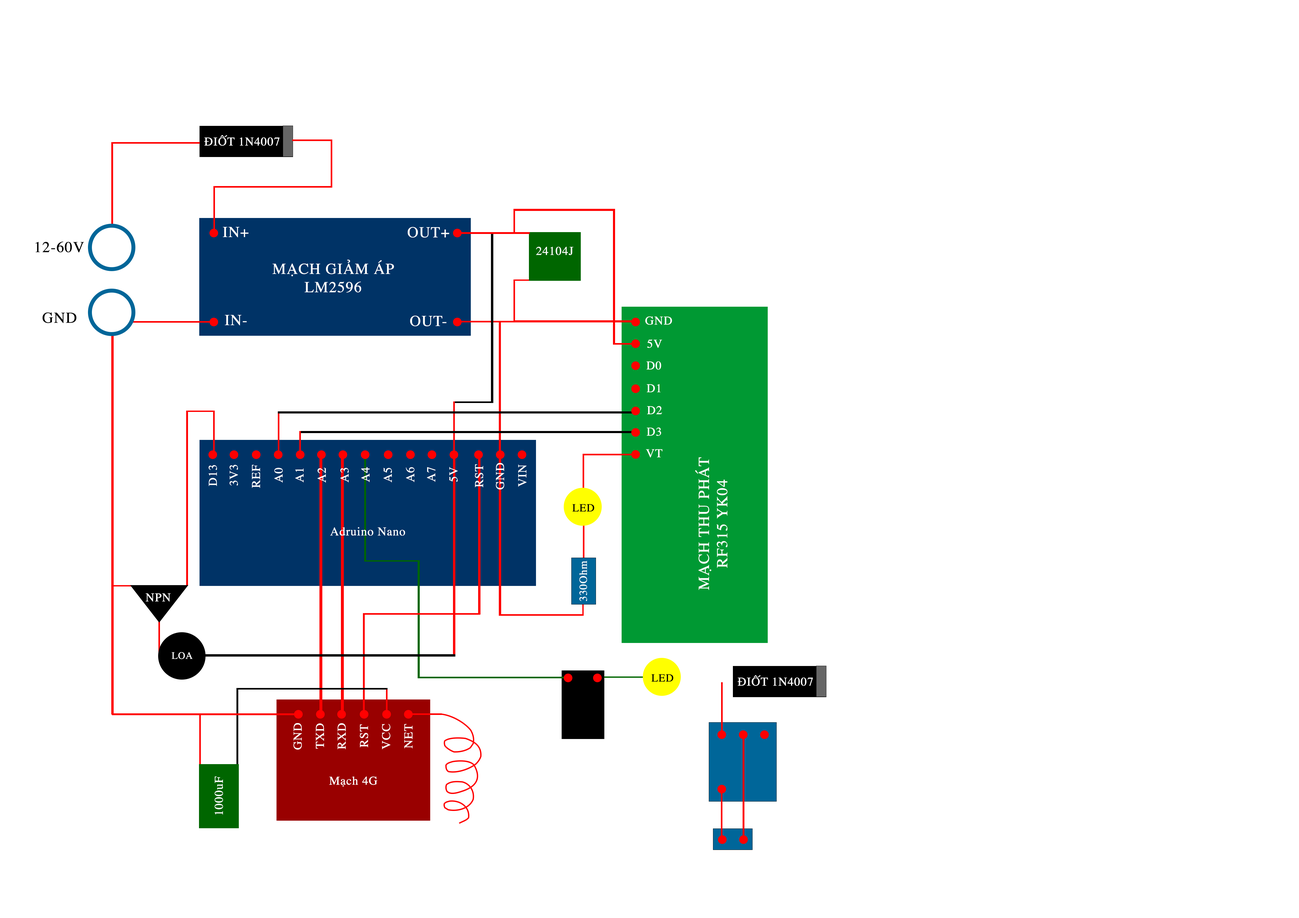
<style>
.page{position:relative;width:1299px;height:918px;background:#ffffff}
.page>*{position:absolute;margin:0}
.t1{font:12px "Times-Roman";letter-spacing:0.02em;color:#ffffff;font-weight:bold}
.t2{font:15.3px "Times-Roman";letter-spacing:0.02em;color:#ffffff;font-weight:bold}
.t3{font:15.3px "Times-Roman";letter-spacing:0.02em;color:#000000;font-weight:bold}
.t4{font:10.9px "Times-Roman";letter-spacing:0.02em;color:#000000;font-weight:bold}
.t5{font:10.9px "Times-Roman";letter-spacing:0.02em;color:#ffffff;font-weight:bold}
.t6{font:9.8px "Times-Roman";letter-spacing:0.02em;color:#ffffff;font-weight:bold}
</style>
<div class="page">
<p class="t1" style="left:204px;top:135px;width:76px;height:11px">ĐIỐT 1N4007</p>
<p class="t2" style="left:223px;top:227px;width:25px;height:10px">IN+</p>
<p class="t2" style="left:408px;top:227px;width:41px;height:11px">OUT+</p>
<p class="t3" style="left:35px;top:242px;width:49px;height:11px">12-60V</p>
<p class="t1" style="left:536px;top:247px;width:37px;height:8px">24104J</p>
<p class="t2" style="left:272px;top:260px;width:122px;height:33px;text-align:center">MẠCH GIẢM ÁP<br>LM2596</p>
<p class="t3" style="left:42px;top:313px;width:34px;height:10px">GND</p>
<p class="t2" style="left:225px;top:315px;width:22px;height:11px">IN-</p>
<p class="t2" style="left:410px;top:316px;width:36px;height:10px">OUT-</p>
<p class="t1" style="left:645px;top:316px;width:27px;height:9px">GND</p>
<p class="t1" style="left:647px;top:339px;width:15px;height:9px">5V</p>
<p class="t1" style="left:646px;top:361px;width:15px;height:9px">D0</p>
<p class="t1" style="left:647px;top:384px;width:13px;height:8px">D1</p>
<p class="t1" style="left:647px;top:406px;width:15px;height:8px">D2</p>
<p class="t1" style="left:647px;top:427px;width:14px;height:9px">D3</p>
<p class="t1" style="left:646px;top:449px;width:16px;height:9px">VT</p>
<p class="t2" style="left:695px;top:457px;width:32px;height:133px;text-align:center;rotate:-90deg">MẠCH THU PHÁT<br>RF315 YK04</p>
<p class="t1" style="left:208px;top:465px;width:9px;height:21px;rotate:-90deg">D13</p>
<p class="t1" style="left:229px;top:465px;width:9px;height:21px;rotate:-90deg">3V3</p>
<p class="t1" style="left:252px;top:465px;width:8px;height:23px;rotate:-90deg">REF</p>
<p class="t1" style="left:274px;top:468px;width:9px;height:15px;rotate:-90deg">A0</p>
<p class="t1" style="left:295px;top:469px;width:9px;height:14px;rotate:-90deg">A1</p>
<p class="t1" style="left:317px;top:468px;width:9px;height:15px;rotate:-90deg">A2</p>
<p class="t1" style="left:340px;top:468px;width:9px;height:15px;rotate:-90deg">A3</p>
<p class="t1" style="left:361px;top:467px;width:9px;height:15px;rotate:-90deg">A4</p>
<p class="t1" style="left:383px;top:468px;width:9px;height:15px;rotate:-90deg">A5</p>
<p class="t1" style="left:406px;top:467px;width:8px;height:15px;rotate:-90deg">A6</p>
<p class="t1" style="left:427px;top:467px;width:8px;height:15px;rotate:-90deg">A7</p>
<p class="t1" style="left:449px;top:467px;width:9px;height:15px;rotate:-90deg">5V</p>
<p class="t1" style="left:475px;top:464px;width:8px;height:23px;rotate:-90deg">RST</p>
<p class="t1" style="left:496px;top:463px;width:8px;height:27px;rotate:-90deg">GND</p>
<p class="t1" style="left:518px;top:465px;width:8px;height:22px;rotate:-90deg">VIN</p>
<p class="t4" style="left:572px;top:504px;width:22px;height:8px">LED</p>
<p class="t1" style="left:330px;top:527px;width:75px;height:9px">Adruino Nano</p>
<p class="t5" style="left:579px;top:561px;width:8px;height:40px;rotate:-90deg">330Ohm</p>
<p class="t1" style="left:146px;top:593px;width:25px;height:9px">NPN</p>
<p class="t6" style="left:171px;top:652px;width:22px;height:7px">LOA</p>
<p class="t4" style="left:651px;top:674px;width:22px;height:8px">LED</p>
<p class="t1" style="left:737px;top:675px;width:76px;height:11px">ĐIỐT 1N4007</p>
<p class="t1" style="left:293px;top:723px;width:9px;height:27px;rotate:-90deg">GND</p>
<p class="t1" style="left:316px;top:724px;width:8px;height:25px;rotate:-90deg">TXD</p>
<p class="t1" style="left:337px;top:723px;width:9px;height:27px;rotate:-90deg">RXD</p>
<p class="t1" style="left:360px;top:725px;width:8px;height:23px;rotate:-90deg">RST</p>
<p class="t1" style="left:382px;top:724px;width:8px;height:26px;rotate:-90deg">VCC</p>
<p class="t1" style="left:404px;top:724px;width:9px;height:25px;rotate:-90deg">NET</p>
<p class="t1" style="left:214px;top:777px;width:9px;height:38px;rotate:-90deg">1000uF</p>
<p class="t1" style="left:329px;top:777px;width:48px;height:10px">Mạch 4G</p>
</div>
